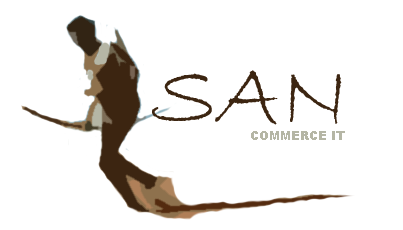
<style>
.page{position:relative;width:403px;height:230px;background:#ffffff}
.page>*{position:absolute;margin:0}
.t1{font:90px "BradleyHandITC";color:#3c2511}
.t2{font:12px "Arial-Black";color:#b5b6a5}
</style>
<div class="page">
<p class="t1" style="left:152px;top:70px;width:190px;height:55px">SAN</p>
<p class="t2" style="left:251px;top:131px;width:94px;height:9px">COMMERCE IT</p>
</div>
